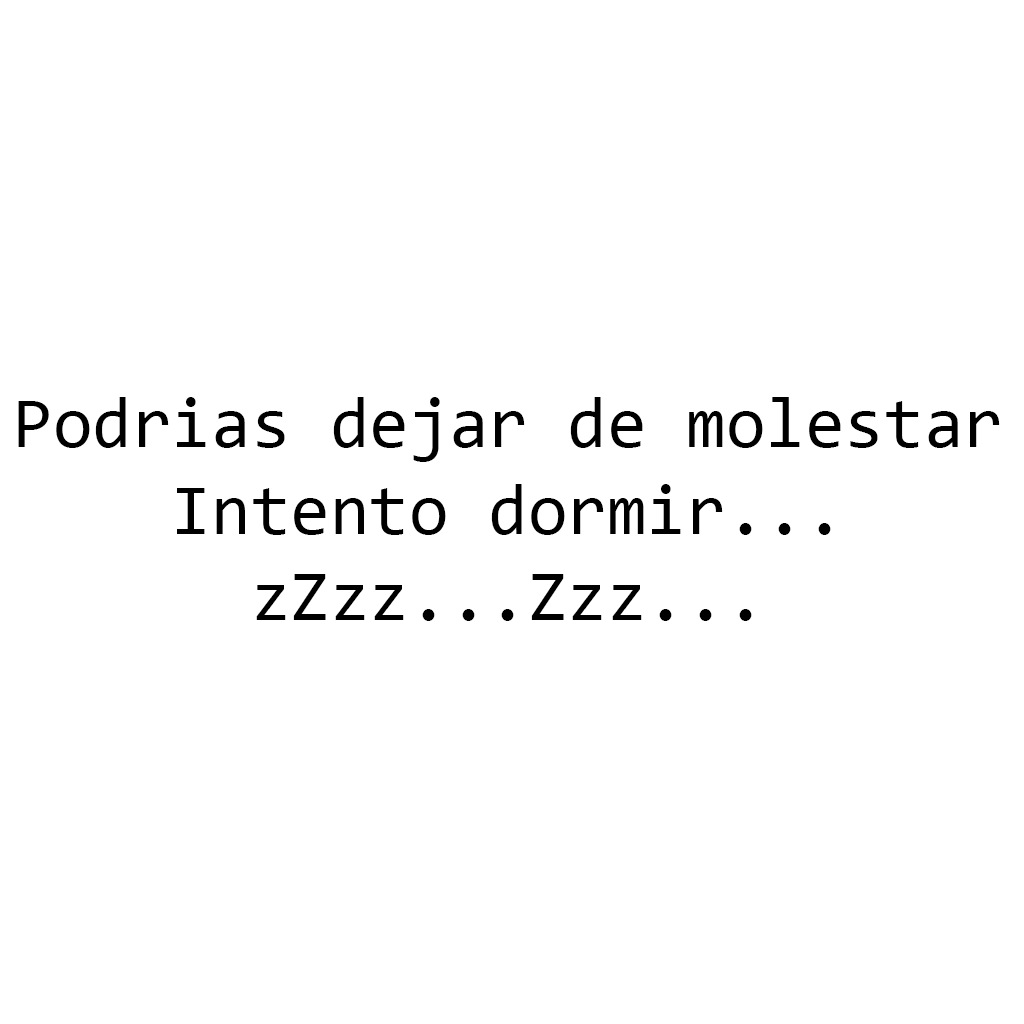
<style>
.page{position:relative;width:1024px;height:1024px;background:#ffffff}
.page>*{position:absolute;margin:0}
.t1{font:72px "Consolas";color:#000000}
</style>
<div class="page">
<p class="t1" style="left:18px;top:397px;width:982px;height:224px;text-align:center">Podrias dejar de molestar<br>Intento dormir...<br>zZzz...Zzz...</p>
</div>
